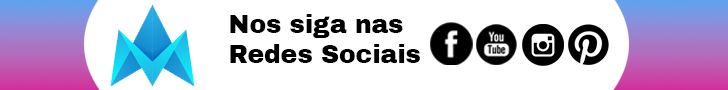
<style>
.page{position:relative;width:728px;height:90px;background:#ffffff}
.page>*{position:absolute;margin:0}
.t1{font:25px "ArchivoBlack-Regular";color:#000000}
</style>
<div class="page">
<p class="t1" style="left:230px;top:14px;width:190px;height:49px">Nos siga nas<br>Redes Sociais</p>
</div>
